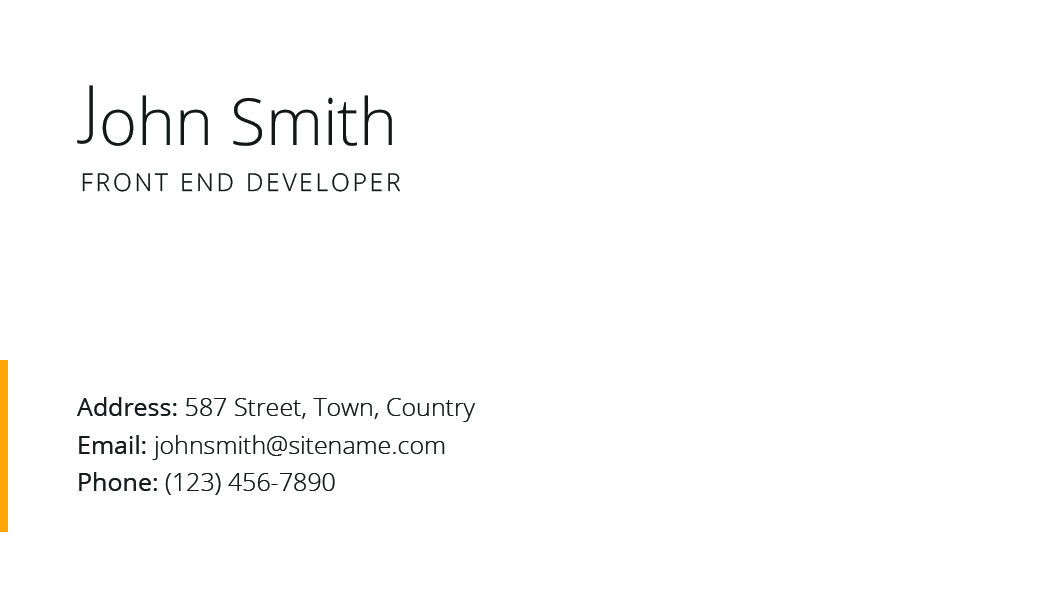
<style>
.page{position:relative;width:1063px;height:591px;background:#ffffff}
.page>*{position:absolute;margin:0}
.t1{font:65px "OpenSans-Light";color:#141819}
.t2{font:24.4px "OpenSans-Light";letter-spacing:0.118em;color:#141819}
.t3{font:25px/37.5px "OpenSans-Light";color:#161b1b}
.t4{font:25px/37.5px "OpenSans";color:#161b1b;text-transform:uppercase}
.t5{font:25px/37.5px "OpenSans";color:#161b1b}
</style>
<div class="page">
<p class="t1" style="left:77px;top:85px;width:16px;height:59px">J</p>
<p class="t1" style="left:102px;top:95px;width:290px;height:51px">ohn Smith</p>
<p class="t2" style="left:82px;top:173px;width:318px;height:19px">FRONT END DEVELOPER</p>
<p class="t3" style="left:77px;top:397px;width:398px;height:98px"><span class="t4">a</span><span class="t5">ddress: </span>587 Street, Town, Country<br><span class="t4">e</span><span class="t5">mail: </span>johnsmith@sitename.com<br><span class="t5">Phone:</span> (123) 456-7890</p>
</div>
